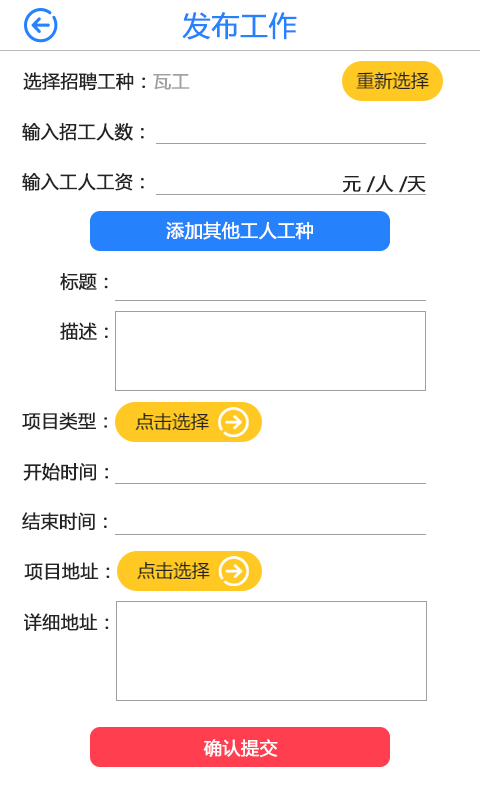
<style>
.page{position:relative;width:480px;height:800px;background:#ffffff}
.page>*{position:absolute;margin:0}
.t1{font:28px "MicrosoftYaHei";color:#2681fc;font-weight:bold}
.t2{font:18px "MicrosoftYaHei";color:#252323;font-weight:bold}
.t3{font:18px "MicrosoftYaHei";color:#a0a0a0;font-weight:bold}
.t4{font:18px "MicrosoftYaHei";color:#ffffff;font-weight:bold}
</style>
<div class="page">
<p class="t1" style="left:182px;top:12px;width:115px;height:28px">发布工作</p>
<p class="t2" style="left:23px;top:72px;width:167px;height:19px">选择招聘工种：<span class="t3">瓦工</span></p>
<p class="t2" style="left:22px;top:123px;width:122px;height:18px">输入招工人数：</p>
<p class="t2" style="left:22px;top:173px;width:122px;height:18px">输入工人工资：</p>
<p class="t2" style="left:342px;top:175px;width:84px;height:18px">元 /人 /天</p>
<p class="t4" style="left:166px;top:221px;width:147px;height:19px">添加其他工人工种</p>
<p class="t2" style="left:60px;top:273px;width:48px;height:18px">标题：</p>
<p class="t2" style="left:60px;top:322px;width:48px;height:18px">描述：</p>
<p class="t2" style="left:22px;top:412px;width:85px;height:18px">项目类型：</p>
<p class="t2" style="left:23px;top:463px;width:85px;height:18px">开始时间：</p>
<p class="t2" style="left:22px;top:512px;width:85px;height:18px">结束时间：</p>
<p class="t2" style="left:24px;top:562px;width:86px;height:19px">项目地址：</p>
<p class="t2" style="left:24px;top:613px;width:85px;height:18px">详细地址：</p>
<p class="t4" style="left:203px;top:739px;width:75px;height:18px">确认提交</p>
</div>
